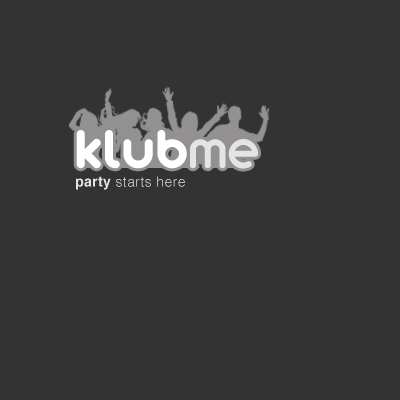
<style>
.page{position:relative;width:400px;height:400px;background:#333333}
.page>*{position:absolute;margin:0}
.t1{font:60px "zArista";letter-spacing:0.028em;color:#ffffff}
.t2{font:60px "zAristaLight";letter-spacing:0.028em;color:#e4e4e4}
.t3{font:14px "Helvetica-Light";letter-spacing:0.028em;color:#e4e4e4}
.t4{font:14px "Helvetica-Bold";letter-spacing:0.028em;color:#e4e4e4}
</style>
<div class="page">
<p class="t1" style="left:76px;top:130px;width:182px;height:39px">klub<span class="t2">me</span></p>
<p class="t3" style="left:76px;top:176px;width:109px;height:14px"><span class="t4">party </span>starts here</p>
</div>
